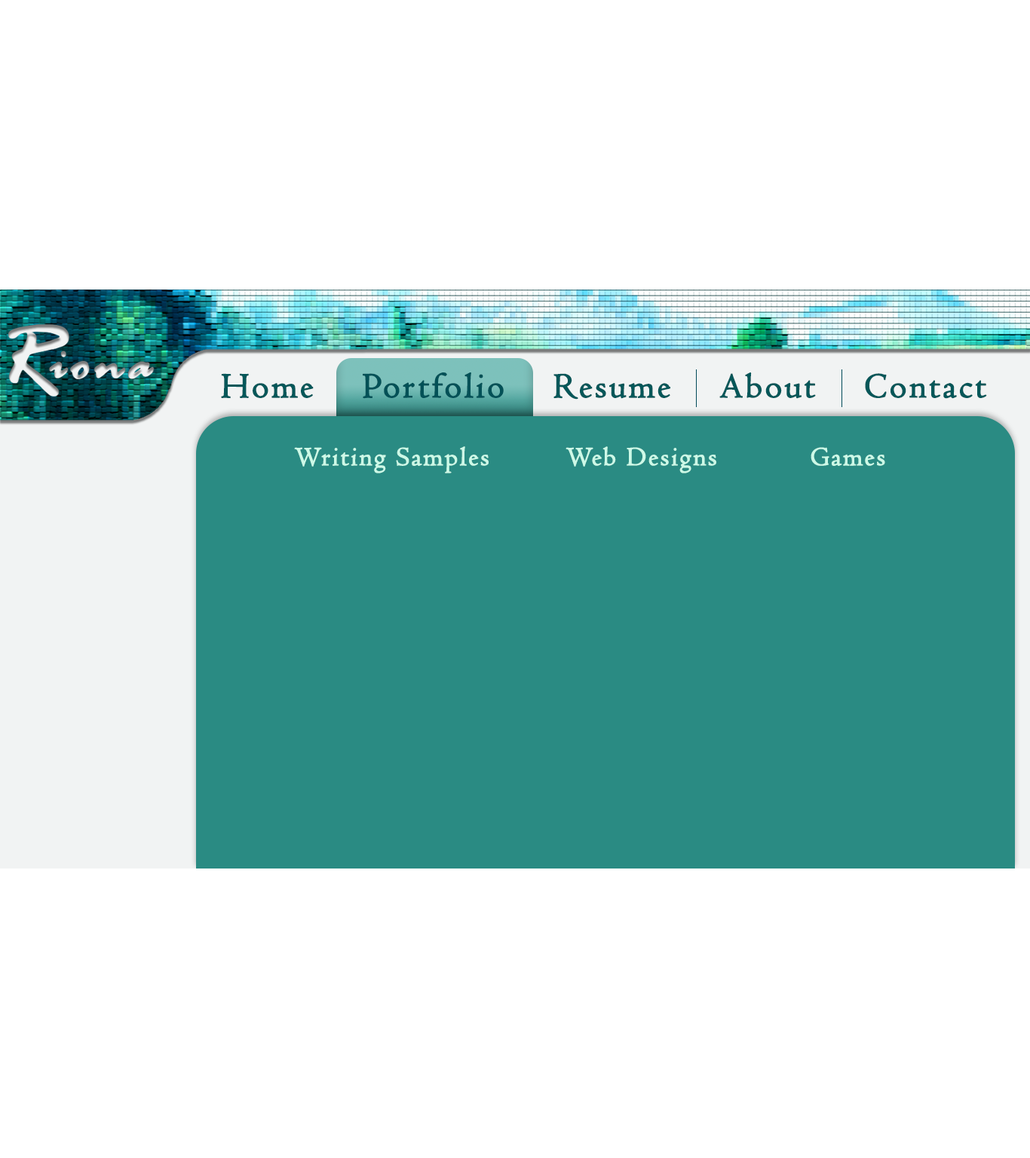
<style>
.page{position:relative;width:1030px;height:1158px;background:#ffffff}
.page>*{position:absolute;margin:0}
.t1{font:36.2px "Centaur";letter-spacing:0.05em;color:#055759;font-weight:bold}
.t2{font:36.2px "Centaur";letter-spacing:0.05em;color:#035157;font-weight:bold}
.t3{font:27.1px "Centaur";letter-spacing:0.05em;color:#cdf9e7;font-weight:bold}
</style>
<div class="page">
<p class="t1" style="left:221px;top:372px;width:766px;height:28px">Home   <span class="t2"> Portfolio</span>    Resume    About    Contact</p>
<p class="t3" style="left:294px;top:446px;width:591px;height:27px">Writing Samples   Web Designs    Games</p>
</div>
